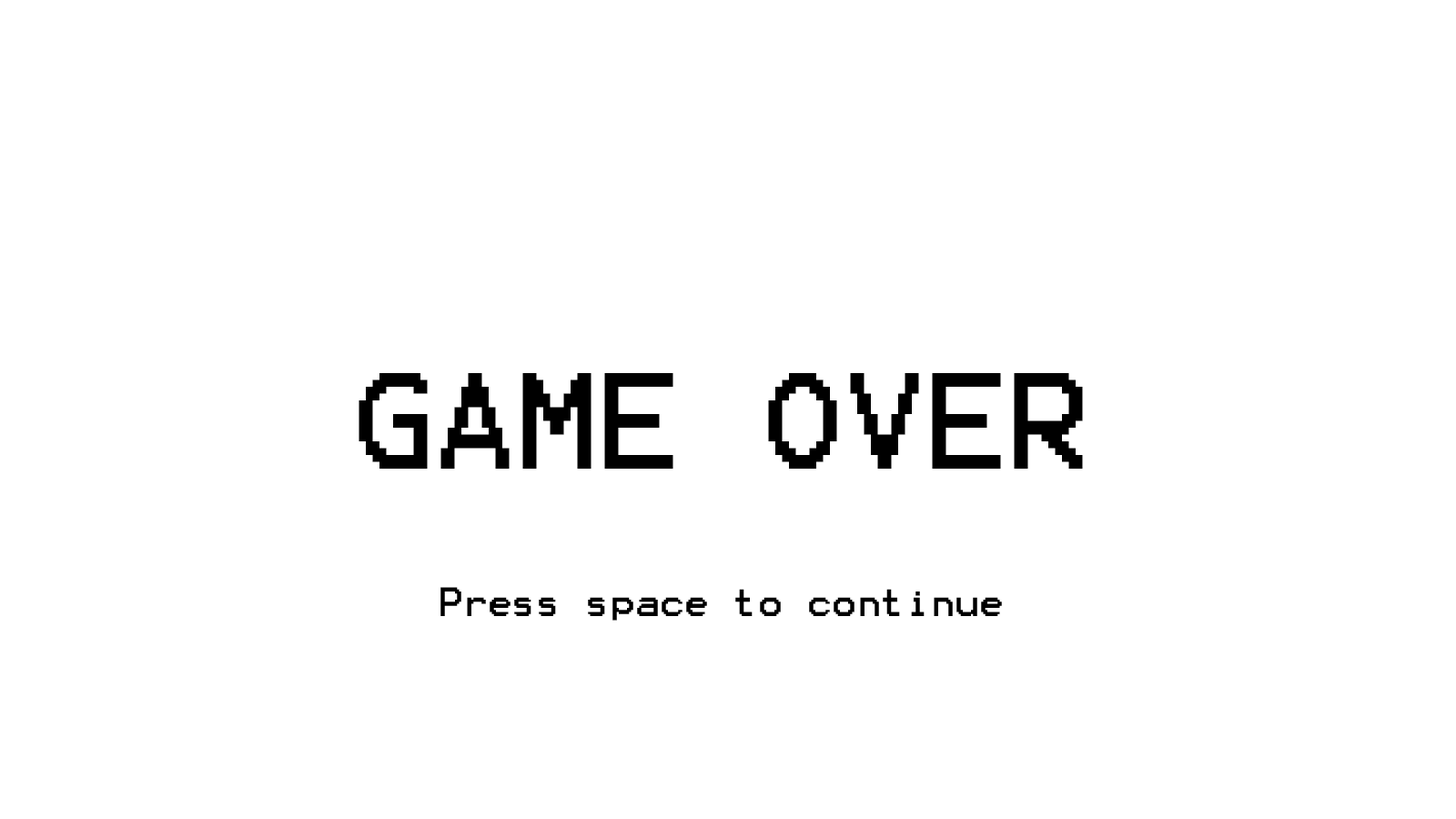
<style>
.page{position:relative;width:1456px;height:819px;background:#ffffff}
.page>*{position:absolute;margin:0}
.t1{font:109.2px "Terminal";color:#000000}
.t2{font:32.8px "Terminal";color:#000000}
</style>
<div class="page">
<p class="t1" style="left:359px;top:373px;width:724px;height:96px">GAME OVER</p>
<p class="t2" style="left:440px;top:587px;width:562px;height:34px">Press space to continue</p>
</div>
